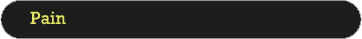
<style>
.page{position:relative;width:362px;height:39px;background:#1d1d1b}
.page>*{position:absolute;margin:0}
.t1{font:18px "Rockwell";color:#e1e164}
</style>
<div class="page">
<p class="t1" style="left:30px;top:11px;width:36px;height:14px">Pain</p>
</div>
